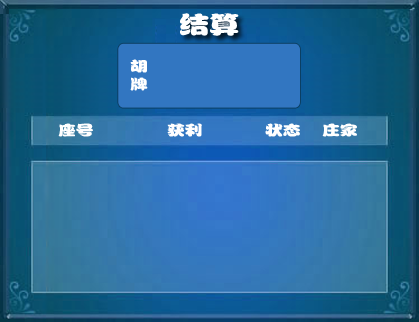
<style>
.page{position:relative;width:419px;height:322px}
.page>*{position:absolute;margin:0}
.t1{font:24px "FZPWJW--GB1-0";color:#ffffff;scale:1.26 1}
.t2{font:14px "FZPWJW--GB1-0";color:#ffffff;scale:1.26 1}
</style>
<div class="page">
<p class="t1" style="left:180px;top:13px;width:59px;height:23px">结算</p>
<p class="t2" style="left:130px;top:59px;width:18px;height:32px">胡<br>牌</p>
<p class="t2" style="left:58px;top:123px;width:35px;height:14px">座号</p>
<p class="t2" style="left:167px;top:123px;width:35px;height:14px">获利</p>
<p class="t2" style="left:265px;top:123px;width:35px;height:14px">状态</p>
<p class="t2" style="left:322px;top:123px;width:35px;height:14px">庄家</p>
</div>
